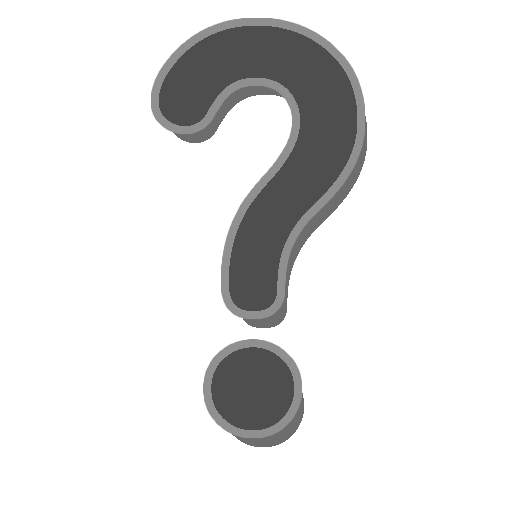
<style>
.page{position:relative;width:512px;height:512px;background:#ffffff}
.page>*{position:absolute;margin:0}
.t1{font:476.4px "UDDigiKyokashoN-B";color:#4e4e4e}
</style>
<div class="page">
<p class="t1" style="left:159px;top:26px;width:198px;height:404px">?</p>
</div>
